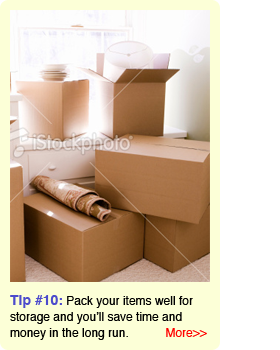
<style>
.page{position:relative;width:280px;height:350px;background:#ffffff}
.page>*{position:absolute;margin:0}
.t1{font:12px/16px "Helvetica";color:#000000}
.t2{font:14px/16px "Helvetica-Bold";color:#4c4bcc}
.t3{font:12px/16px "Helvetica";color:#ff0000}
</style>
<div class="page">
<p class="t1" style="left:10px;top:295px;width:197px;height:45px"><span class="t2">Tip #10:</span> Pack your items well for storage and you’ll save time and money in the long run.           <span class="t3">More&gt;&gt;</span></p>
</div>
